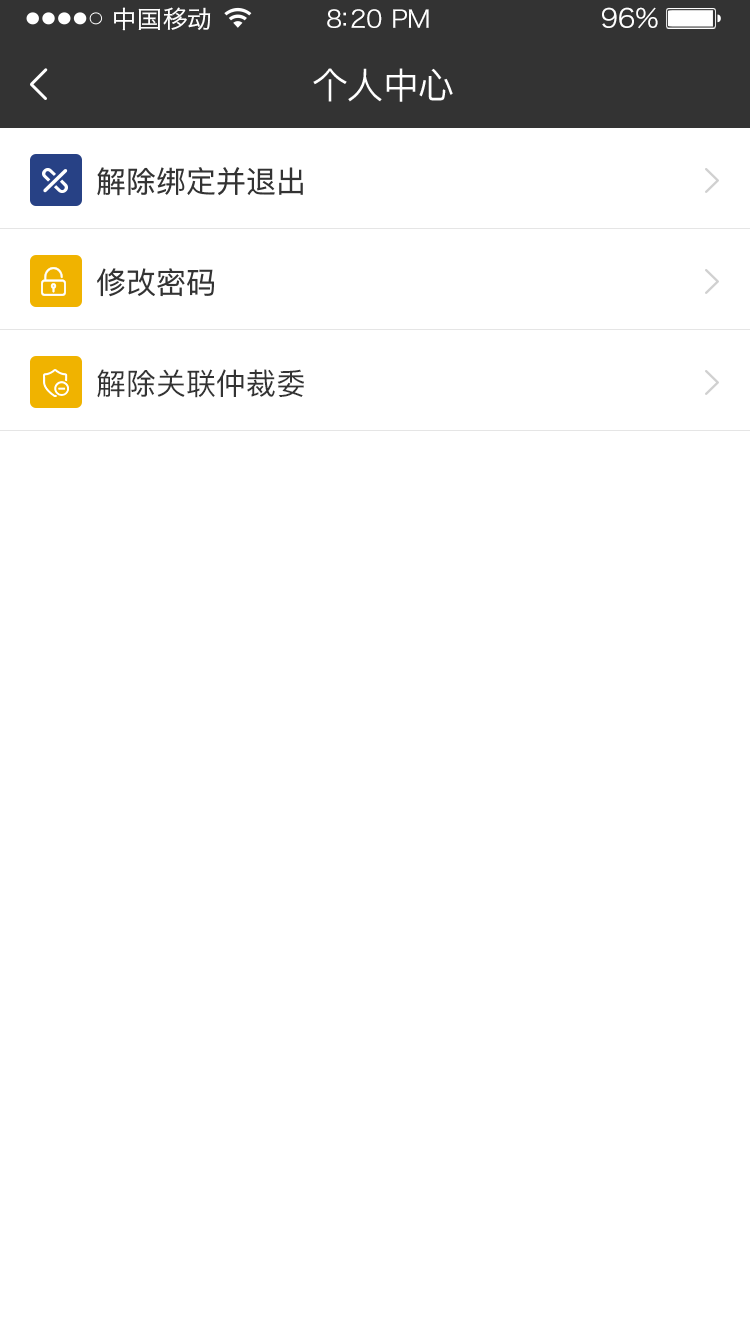
<style>
.page{position:relative;width:750px;height:1334px;background:#ffffff}
.page>*{position:absolute;margin:0}
.t1{font:24px "HiraginoSansGB-W3";letter-spacing:0.02em;color:#ffffff;scale:1.03 1}
.t2{font:24px "HiraginoSansGB-W3";letter-spacing:-0.02em;color:#ffffff;scale:1.03 1}
.t3{font:26.2px "HiraginoSansGB-W3";letter-spacing:-0.02em;color:#ffffff;scale:1.03 1}
.t4{font:36px "PingFangSC-Regular";letter-spacing:-0.02em;color:#ffffff}
.t5{font:30px "PingFangSC-Regular";color:#333333}
.t6{font:30px "PingFang-SC-Medium";color:#333333}
</style>
<div class="page">
<p class="t1" style="left:114px;top:7px;width:97px;height:24px">中国移动</p>
<p class="t2" style="left:327px;top:9px;width:102px;height:19px">8:20 PM</p>
<p class="t3" style="left:602px;top:7px;width:56px;height:22px">96%</p>
<p class="t4" style="left:313px;top:68px;width:140px;height:34px">个人中心</p>
<p class="t5" style="left:97px;top:167px;width:206px;height:29px">解除绑定并退出</p>
<p class="t5" style="left:97px;top:268px;width:117px;height:29px">修改密码</p>
<p class="t6" style="left:97px;top:369px;width:207px;height:29px">解除关联仲裁委</p>
</div>
